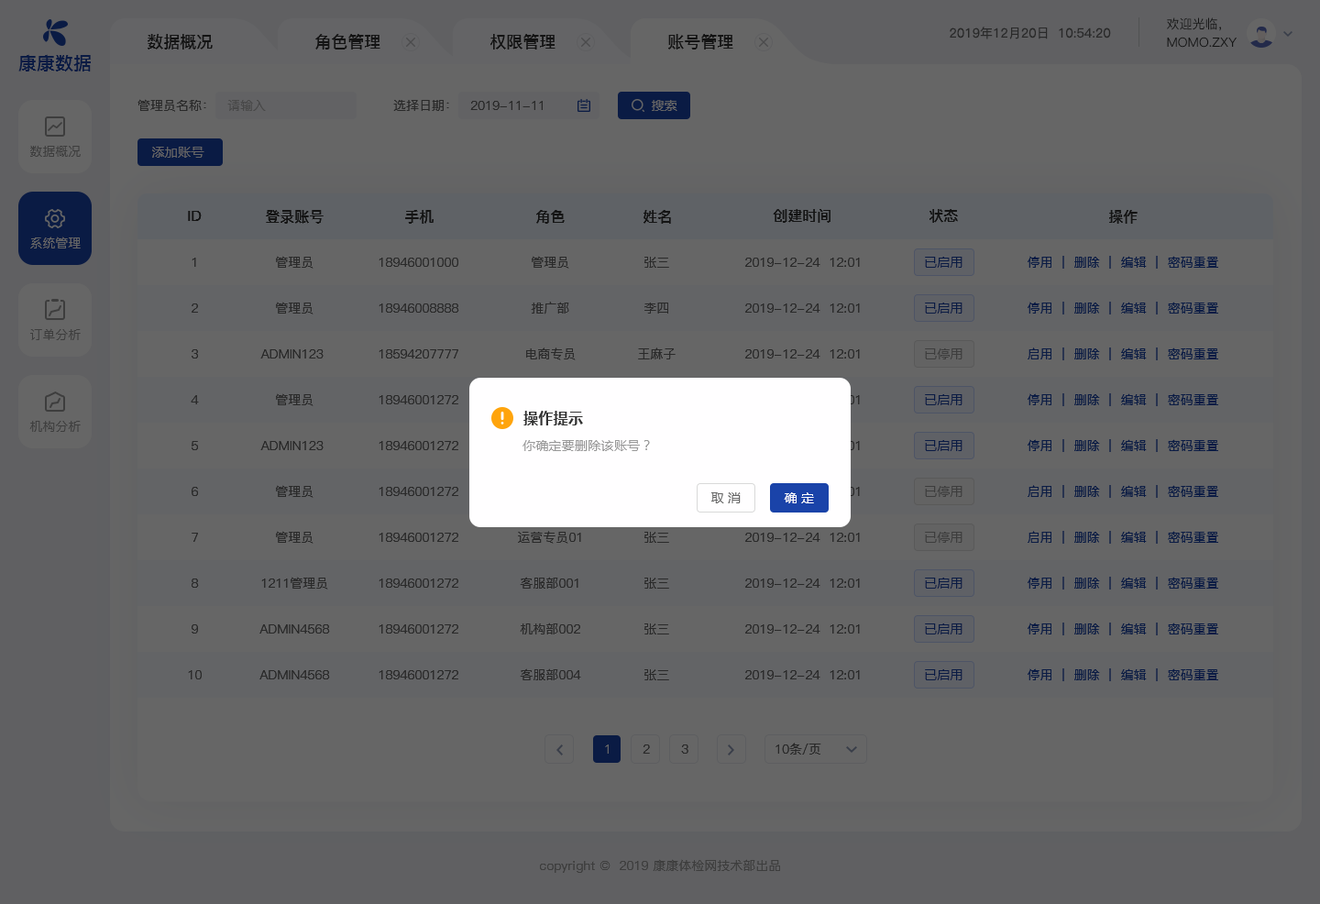
<style>
.page{position:relative;width:1320px;height:904px;background:#666666}
.page>*{position:absolute;margin:0}
.t1{font:12.8px "PingFang-SC-Medium";color:#141414;text-transform:uppercase}
.t2{font:12.8px "PingFang-SC-Regular";color:#292929}
.t3{font:16.5px "PingFang-SC-Bold";color:#141414;text-transform:uppercase}
.t4{font:18.3px "PingFangSC-Medium";color:#0a1b44;text-transform:uppercase}
.t5{font:12.8px "PingFang-SC-Medium";color:#292929}
.t6{font:12.8px "PingFang-SC-Medium";color:#484848}
.t7{font:12.8px "MicrosoftYaHei";letter-spacing:0.02em;color:#666666}
.t8{font:12.8px "PingFang-SC-Medium";color:#3d3d3d;text-transform:uppercase}
.t9{font:14.7px "PingFang-SC-Bold";color:#141414;text-transform:uppercase}
.t10{font:12.8px "PingFang-SC-Medium";color:#666666;text-transform:uppercase}
.t11{font:12.8px "PingFang-SC-Medium";color:#292929;text-transform:uppercase}
.t12{font:12.8px "MicrosoftYaHei";letter-spacing:0.02em;color:#0a1b44}
.t13{font:12.8px "PingFang-SC-Medium";color:#0a1b44;text-transform:uppercase}
.t14{font:12.8px "MicrosoftYaHei";letter-spacing:0.02em;color:#3d3d3d}
.t15{font:14.7px "MicrosoftYaHei-Bold";letter-spacing:0.02em;color:#333333}
.t16{font:12.8px "MicrosoftYaHei";letter-spacing:0.02em;color:#999999}
.t17{font:12.8px "MicrosoftYaHei";letter-spacing:0.02em;color:#ffffff}
.t18{font:12.8px "PingFang-SC-Medium";color:#3d3d3d}
</style>
<div class="page">
<p class="t1" style="left:1167px;top:17px;width:54px;height:14px">欢迎光临，</p>
<p class="t2" style="left:949px;top:27px;width:162px;height:12px">2019年12月20日  10:54:20</p>
<p class="t3" style="left:148px;top:34px;width:65px;height:15px">数据概况</p>
<p class="t3" style="left:315px;top:34px;width:65px;height:15px">角色管理</p>
<p class="t3" style="left:490px;top:34px;width:65px;height:15px">权限管理</p>
<p class="t3" style="left:668px;top:34px;width:65px;height:15px">账号管理</p>
<p class="t1" style="left:1167px;top:37px;width:69px;height:11px">momo.zxy</p>
<p class="t4" style="left:18px;top:54px;width:73px;height:17px">康康数据</p>
<p class="t5" style="left:137px;top:99px;width:69px;height:13px">管理员名称：</p>
<p class="t6" style="left:227px;top:100px;width:39px;height:11px">请输入</p>
<p class="t5" style="left:393px;top:100px;width:56px;height:11px">选择日期：</p>
<p class="t5" style="left:470px;top:101px;width:73px;height:9px">2019-11-11</p>
<p class="t7" style="left:652px;top:100px;width:25px;height:11px">搜索</p>
<p class="t8" style="left:30px;top:146px;width:51px;height:11px">数据概况</p>
<p class="t7" style="left:152px;top:147px;width:52px;height:11px">添加账号</p>
<p class="t9" style="left:266px;top:210px;width:57px;height:14px">登录账号</p>
<p class="t9" style="left:405px;top:210px;width:28px;height:14px">手机</p>
<p class="t9" style="left:536px;top:210px;width:29px;height:14px">角色</p>
<p class="t9" style="left:643px;top:210px;width:28px;height:14px">姓名</p>
<p class="t9" style="left:773px;top:209px;width:57px;height:14px">创建时间</p>
<p class="t9" style="left:929px;top:209px;width:29px;height:14px">状态</p>
<p class="t9" style="left:1109px;top:210px;width:28px;height:14px">操作</p>
<p class="t9" style="left:188px;top:211px;width:14px;height:10px">ID</p>
<p class="t10" style="left:30px;top:236px;width:51px;height:12px">系统管理</p>
<p class="t11" style="left:192px;top:258px;width:4px;height:9px">1</p>
<p class="t11" style="left:276px;top:256px;width:37px;height:13px">管理员</p>
<p class="t11" style="left:378px;top:258px;width:80px;height:9px">18946001000</p>
<p class="t11" style="left:532px;top:256px;width:37px;height:13px">管理员</p>
<p class="t11" style="left:644px;top:257px;width:25px;height:11px">张三</p>
<p class="t11" style="left:745px;top:258px;width:115px;height:9px">2019-12-24  12:01</p>
<p class="t12" style="left:925px;top:257px;width:37px;height:11px">已启用</p>
<p class="t13" style="left:1027px;top:256px;width:191px;height:13px">停用  |  删除  |  编辑  |  密码重置</p>
<p class="t11" style="left:192px;top:303px;width:6px;height:10px">2</p>
<p class="t11" style="left:276px;top:302px;width:37px;height:12px">管理员</p>
<p class="t11" style="left:378px;top:303px;width:81px;height:10px">18946008888</p>
<p class="t11" style="left:531px;top:302px;width:38px;height:12px">推广部</p>
<p class="t11" style="left:644px;top:302px;width:24px;height:11px">李四</p>
<p class="t11" style="left:745px;top:303px;width:115px;height:10px">2019-12-24  12:01</p>
<p class="t12" style="left:925px;top:302px;width:37px;height:11px">已启用</p>
<p class="t13" style="left:1027px;top:302px;width:191px;height:12px">停用  |  删除  |  编辑  |  密码重置</p>
<p class="t8" style="left:30px;top:328px;width:51px;height:12px">订单分析</p>
<p class="t11" style="left:192px;top:349px;width:6px;height:9px">3</p>
<p class="t11" style="left:260px;top:349px;width:63px;height:9px">admin123</p>
<p class="t11" style="left:378px;top:349px;width:80px;height:9px">18594207777</p>
<p class="t11" style="left:526px;top:347px;width:50px;height:13px">电商专员</p>
<p class="t11" style="left:638px;top:347px;width:37px;height:12px">王麻子</p>
<p class="t11" style="left:745px;top:349px;width:115px;height:9px">2019-12-24  12:01</p>
<p class="t14" style="left:925px;top:348px;width:37px;height:11px">已停用</p>
<p class="t13" style="left:1027px;top:347px;width:191px;height:13px">启用  |  删除  |  编辑  |  密码重置</p>
<p class="t11" style="left:191px;top:395px;width:8px;height:9px">4</p>
<p class="t11" style="left:276px;top:393px;width:37px;height:13px">管理员</p>
<p class="t11" style="left:378px;top:395px;width:80px;height:9px">18946001272</p>
<p class="t12" style="left:925px;top:394px;width:37px;height:11px">已启用</p>
<p class="t13" style="left:1027px;top:393px;width:191px;height:13px">停用  |  删除  |  编辑  |  密码重置</p>
<p class="t15" style="left:523px;top:411px;width:60px;height:14px">操作提示</p>
<p class="t8" style="left:29px;top:421px;width:52px;height:11px">机构分析</p>
<p class="t11" style="left:192px;top:441px;width:6px;height:9px">5</p>
<p class="t11" style="left:260px;top:441px;width:63px;height:9px">admin123</p>
<p class="t11" style="left:378px;top:441px;width:80px;height:9px">18946001272</p>
<p class="t16" style="left:522px;top:440px;width:128px;height:11px">你确定要删除该账号？</p>
<p class="t12" style="left:925px;top:440px;width:37px;height:11px">已启用</p>
<p class="t13" style="left:1027px;top:439px;width:191px;height:13px">停用  |  删除  |  编辑  |  密码重置</p>
<p class="t11" style="left:276px;top:485px;width:37px;height:13px">管理员</p>
<p class="t14" style="left:925px;top:486px;width:37px;height:11px">已停用</p>
<p class="t13" style="left:1027px;top:485px;width:191px;height:13px">启用  |  删除  |  编辑  |  密码重置</p>
<p class="t11" style="left:192px;top:487px;width:6px;height:9px">6</p>
<p class="t11" style="left:378px;top:487px;width:80px;height:9px">18946001272</p>
<p class="t7" style="left:711px;top:492px;width:29px;height:11px">取 消</p>
<p class="t17" style="left:784px;top:492px;width:30px;height:11px">确 定</p>
<p class="t11" style="left:192px;top:532px;width:6px;height:10px">7</p>
<p class="t11" style="left:276px;top:531px;width:37px;height:12px">管理员</p>
<p class="t11" style="left:378px;top:532px;width:80px;height:10px">18946001272</p>
<p class="t11" style="left:518px;top:531px;width:63px;height:12px">运营专员01</p>
<p class="t11" style="left:644px;top:532px;width:25px;height:11px">张三</p>
<p class="t11" style="left:745px;top:532px;width:115px;height:10px">2019-12-24  12:01</p>
<p class="t14" style="left:925px;top:532px;width:37px;height:11px">已停用</p>
<p class="t13" style="left:1027px;top:531px;width:191px;height:12px">启用  |  删除  |  编辑  |  密码重置</p>
<p class="t11" style="left:192px;top:578px;width:7px;height:9px">8</p>
<p class="t11" style="left:261px;top:576px;width:67px;height:13px">1211管理员</p>
<p class="t11" style="left:378px;top:578px;width:80px;height:9px">18946001272</p>
<p class="t11" style="left:520px;top:576px;width:58px;height:12px">客服部001</p>
<p class="t11" style="left:644px;top:577px;width:25px;height:11px">张三</p>
<p class="t11" style="left:745px;top:578px;width:115px;height:9px">2019-12-24  12:01</p>
<p class="t12" style="left:925px;top:577px;width:37px;height:11px">已启用</p>
<p class="t13" style="left:1027px;top:576px;width:191px;height:13px">停用  |  删除  |  编辑  |  密码重置</p>
<p class="t11" style="left:192px;top:624px;width:6px;height:9px">9</p>
<p class="t11" style="left:259px;top:624px;width:71px;height:9px">admin4568</p>
<p class="t11" style="left:378px;top:624px;width:80px;height:9px">18946001272</p>
<p class="t11" style="left:520px;top:622px;width:60px;height:12px">机构部002</p>
<p class="t11" style="left:644px;top:623px;width:25px;height:11px">张三</p>
<p class="t11" style="left:745px;top:624px;width:115px;height:9px">2019-12-24  12:01</p>
<p class="t12" style="left:925px;top:623px;width:37px;height:11px">已启用</p>
<p class="t13" style="left:1027px;top:622px;width:191px;height:13px">停用  |  删除  |  编辑  |  密码重置</p>
<p class="t11" style="left:188px;top:670px;width:14px;height:9px">10</p>
<p class="t11" style="left:259px;top:670px;width:71px;height:9px">admin4568</p>
<p class="t11" style="left:378px;top:670px;width:80px;height:9px">18946001272</p>
<p class="t11" style="left:520px;top:668px;width:61px;height:12px">客服部004</p>
<p class="t11" style="left:644px;top:669px;width:25px;height:11px">张三</p>
<p class="t11" style="left:745px;top:670px;width:115px;height:9px">2019-12-24  12:01</p>
<p class="t12" style="left:925px;top:669px;width:37px;height:11px">已启用</p>
<p class="t13" style="left:1027px;top:668px;width:191px;height:13px">停用  |  删除  |  编辑  |  密码重置</p>
<p class="t10" style="left:605px;top:744px;width:4px;height:9px">1</p>
<p class="t11" style="left:642px;top:744px;width:8px;height:9px">2</p>
<p class="t11" style="left:681px;top:744px;width:7px;height:9px">3</p>
<p class="t11" style="left:775px;top:742px;width:46px;height:12px">10条/页</p>
<p class="t18" style="left:540px;top:859px;width:240px;height:13px">copyright ©  2019 康康体检网技术部出品</p>
</div>
